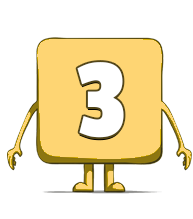
<style>
.page{position:relative;width:193px;height:219px;background:#ffffff}
.page>*{position:absolute;margin:0}
.t1{font:116.6px "PassionOne-Regular";color:#ffffff}
</style>
<div class="page">
<p class="t1" style="left:77px;top:62px;width:47px;height:76px">3</p>
</div>
